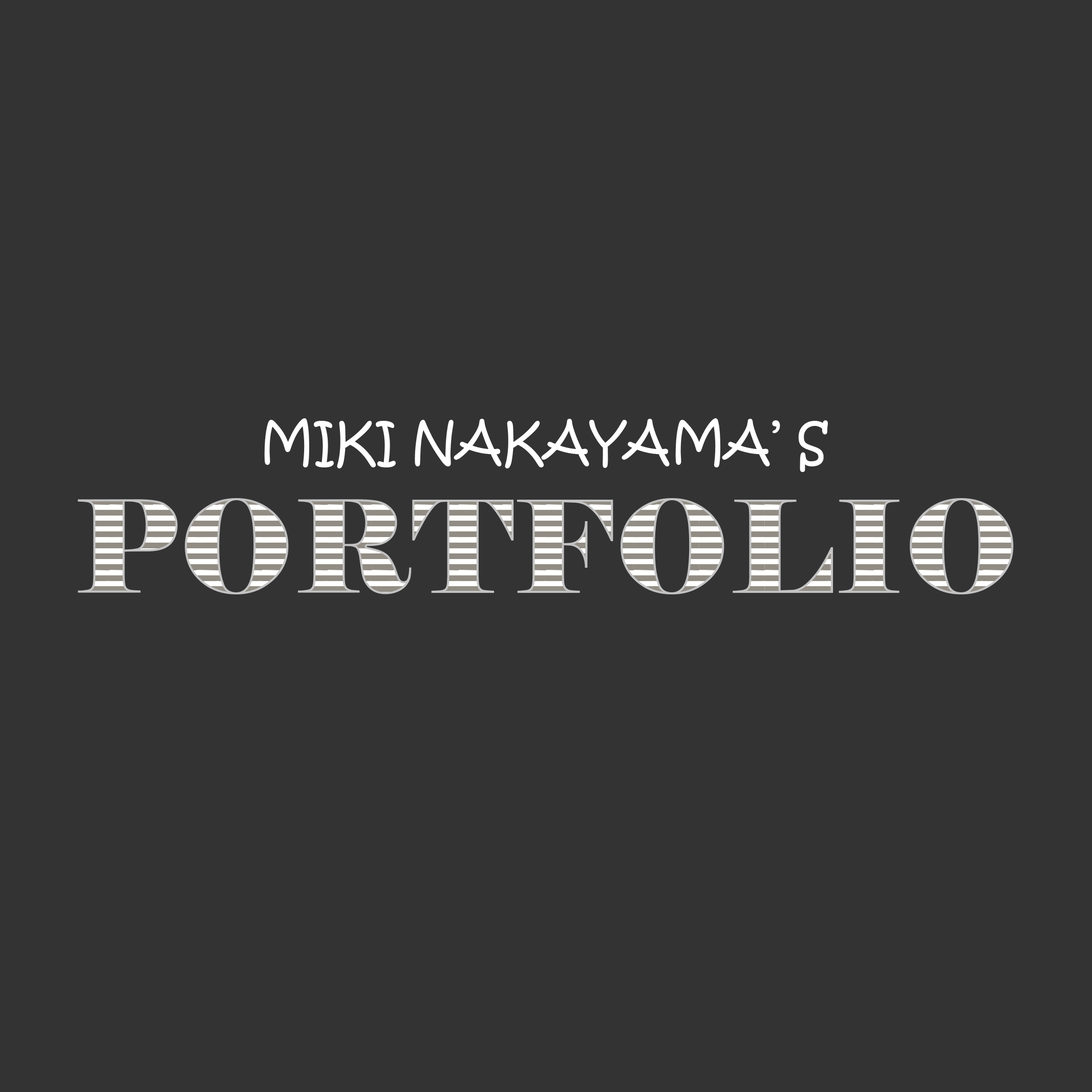
<style>
.page{position:relative;width:1092px;height:1092px;background:#333333}
.page>*{position:absolute;margin:0}
.t1{font:51.2px "KristenITC-Regular";color:#ffffff}
.t2{font:128px "Elephant-Regular"}
</style>
<div class="page">
<p class="t1" style="left:264px;top:418px;width:564px;height:54px">MIKI NAKAYAMA’ S</p>
<p class="t2" style="left:78px;top:498px;width:936px;height:96px">PORTFOLIO</p>
</div>
